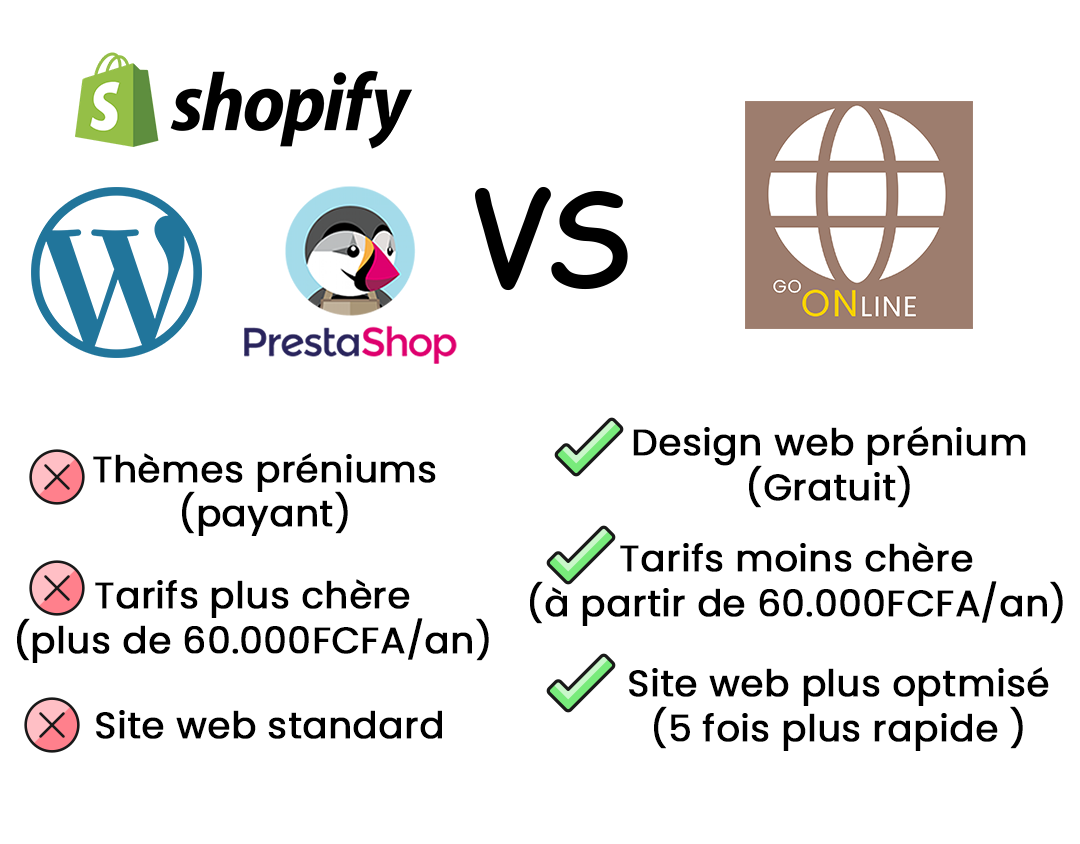
<style>
.page{position:relative;width:1080px;height:844px;background:#ffffff}
.page>*{position:absolute;margin:0}
.t1{font:127.8px "ComicSansMS";letter-spacing:-0.075em;color:#000000;font-weight:bold}
.t2{font:36.8px "Poppins-Regular";color:#000000;font-weight:bold}
</style>
<div class="page">
<p class="t1" style="left:475px;top:186px;width:153px;height:105px">VS</p>
<p class="t2" style="left:633px;top:426px;width:393px;height:82px;text-align:center">Design web prénium<br>(Gratuit)</p>
<p class="t2" style="left:93px;top:453px;width:343px;height:83px;text-align:center">Thèmes préniums<br>(payant)</p>
<p class="t2" style="left:530px;top:542px;width:533px;height:84px;text-align:center">Tarifs moins chère<br>(à partir de 60.000FCFA/an)</p>
<p class="t2" style="left:17px;top:579px;width:472px;height:84px;text-align:center">Tarifs plus chère<br>(plus de 60.000FCFA/an)</p>
<p class="t2" style="left:629px;top:667px;width:420px;height:84px;text-align:center">Site web plus optmisé<br>(5 fois plus rapide )</p>
<p class="t2" style="left:96px;top:710px;width:346px;height:29px">Site web standard</p>
</div>
